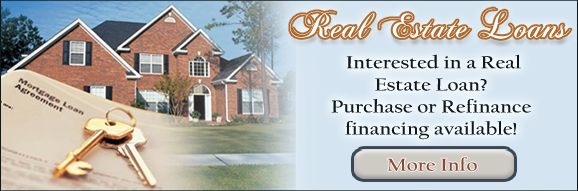
<style>
.page{position:relative;width:578px;height:191px}
.page>*{position:absolute;margin:0}
.t1{font:36px "ChopinScript";color:#feffff;scale:1.04 1}
.t2{font:18.4px "CalifornianFB-Bold";color:#0e181d;scale:1.15 1}
.t3{font:18.4px "CalifornianFB-Bold";color:#8c482f;scale:1.15 1}
</style>
<div class="page">
<p class="t1" style="left:290px;top:8px;width:281px;height:31px">Real Estate Loans</p>
<p class="t2" style="left:331px;top:54px;width:200px;height:86px;text-align:center">Interested in a Real Estate Loan? <br>Purchase or Refinance financing available!</p>
<p class="t3" style="left:387px;top:157px;width:90px;height:14px">More Info</p>
</div>
